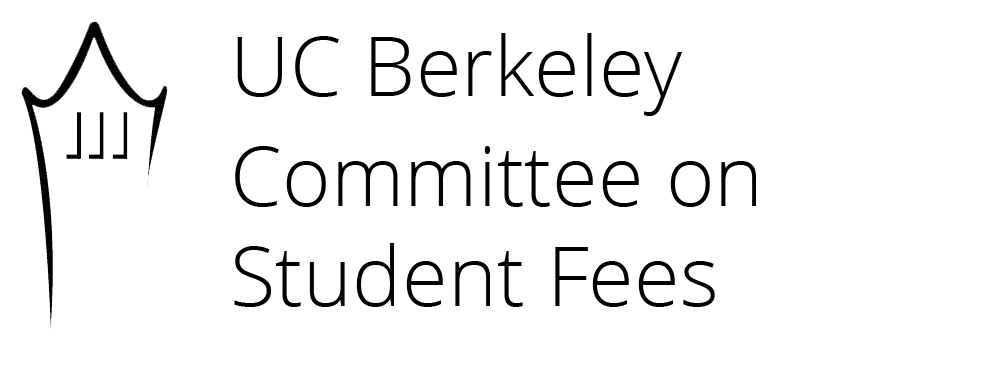
<style>
.page{position:relative;width:997px;height:383px;background:#ffffff}
.page>*{position:absolute;margin:0}
.t1{font:83.3px "OpenSans-Light";color:#000000}
</style>
<div class="page">
<p class="t1" style="left:234px;top:33px;width:522px;height:274px">UC Berkeley<br><br>Committee on <br>Student Fees</p>
</div>
